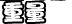
<style>
.page{position:relative;width:72px;height:24px;background:#ffffff}
.page>*{position:absolute;margin:0}
.t1{font:22px "DFPHaiBaoW12";letter-spacing:0.025em;color:#ffffff}
</style>
<div class="page">
<p class="t1" style="left:3px;top:2px;width:42px;height:21px">重量</p>
</div>
